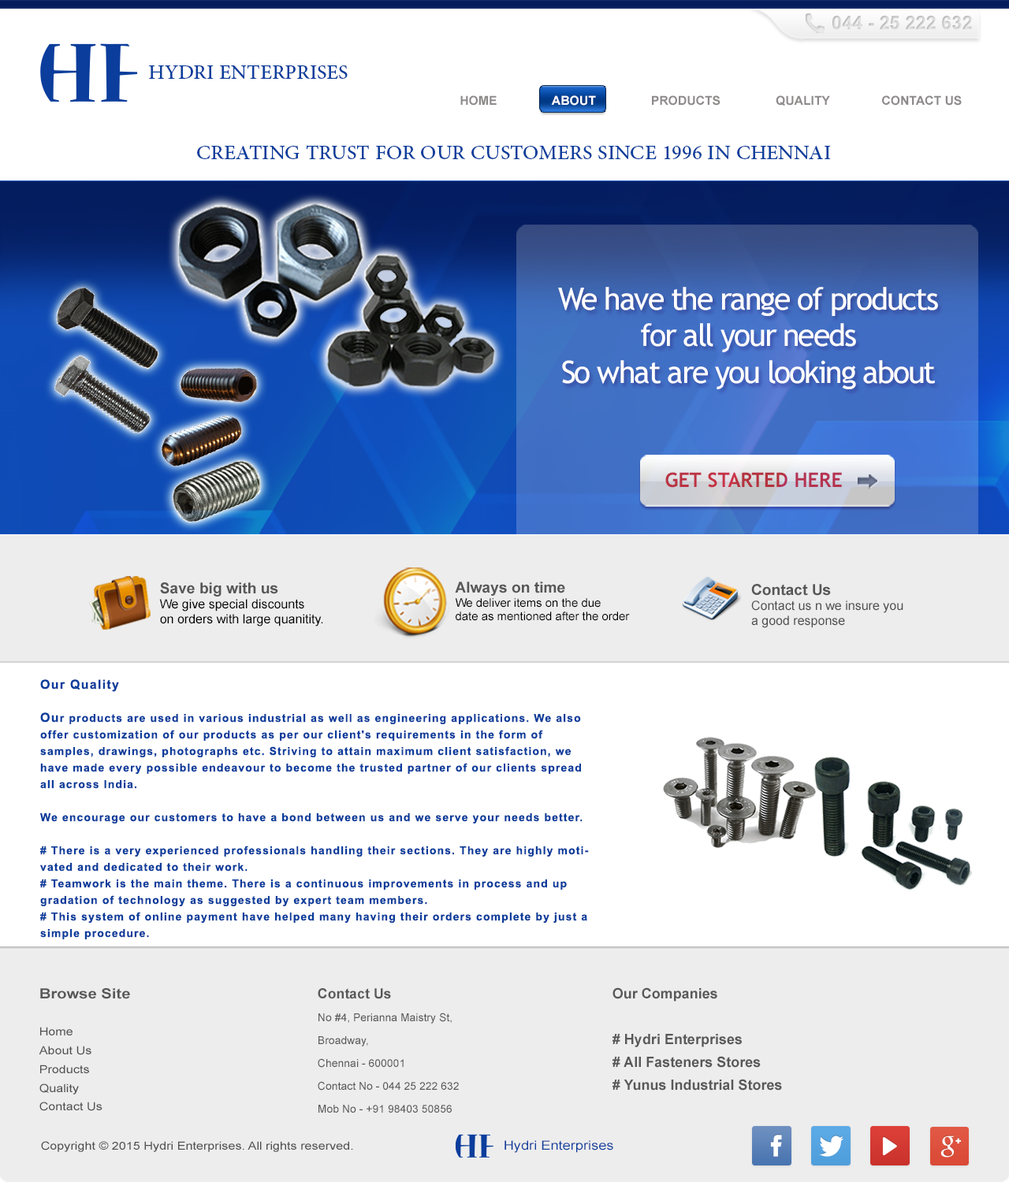
<style>
.page{position:relative;width:1009px;height:1182px;background:#ffffff}
.page>*{position:absolute;margin:0}
.t1{font:18.7px "Arial-BoldMT";color:#c0c0c0;text-transform:uppercase}
.t2{font:28.3px "AdobeArabic-Regular";color:#0c3e9c;text-transform:uppercase}
.t3{font:12.5px "Arial-BoldMT";color:#8d8a8a;text-transform:uppercase}
.t4{font:12.5px "Arial-BoldMT";color:#ffffff;text-transform:uppercase}
.t5{font:28.4px "AdobeArabic-Regular";color:#0c3e9c;text-transform:uppercase}
.t6{font:30.8px "TrebuchetMS";letter-spacing:-0.05em;color:#ffffff}
.t7{font:20px "TrebuchetMS-Bold";color:#b53343;text-transform:uppercase}
.t8{font:11.8px "ArialMT";color:#000000}
.t9{font:15.1px "Arial-BoldMT";color:#575757}
.t10{font:12.6px "ArialMT";color:#000000}
.t11{font:12.6px "ArialMT";color:#4f4f4f}
.t12{font:11px/16.5px "Arial-BoldMT";letter-spacing:0.08em;color:#0b3d9c}
.t13{font:12.6px/16.5px "Arial-BoldMT";letter-spacing:0.08em;color:#0b3d9c}
.t14{font:11.2px/18.7px "ArialMT";color:#4f4f4f;scale:1.14 1}
.t15{font:14px/18.7px "Arial-BoldMT";color:#585858;scale:1.14 1}
.t16{font:11px/22.9px "ArialMT";color:#585858}
.t17{font:14px/22.9px "Arial-BoldMT";color:#585858}
.t18{font:14.2px/22.9px "Arial-BoldMT";color:#585858}
.t19{font:11.2px "ArialMT";color:#4f4f4f;scale:1.14 1}
.t20{font:12.6px "ArialMT";color:#0c3e9c;scale:1.14 1}
</style>
<div class="page">
<p class="t1" style="left:832px;top:16px;width:140px;height:14px">044 - 25 222 632</p>
<p class="t2" style="left:148px;top:65px;width:200px;height:14px">Hydri enterprises</p>
<p class="t3" style="left:460px;top:95px;width:501px;height:11px">Home                <span class="t4">About  </span>              Products                Quality               Contact US</p>
<p class="t5" style="left:197px;top:145px;width:634px;height:14px">CREATING tRUST fOR OUR cUSTOMERS SINCE 1996 IN cHENNAI</p>
<p class="t6" style="left:558px;top:287px;width:380px;height:102px;text-align:center">We have the range of products<br>for all your needs<br>So what are you looking about</p>
<p class="t7" style="left:665px;top:472px;width:177px;height:16px">get started here</p>
<p class="t8" style="left:455px;top:582px;width:175px;height:39px"><span class="t9">Always on time<br></span>We deliver items on the due <br>date as mentioned after the order</p>
<p class="t10" style="left:159px;top:582px;width:164px;height:45px"><span class="t9">Save big with us<br></span>We give special discounts<br>on orders with large quanitity.</p>
<p class="t11" style="left:751px;top:584px;width:152px;height:44px"><span class="t9">Contact Us<br></span>Contact us n we insure you<br>a good response</p>
<p class="t12" style="left:40px;top:679px;width:549px;height:260px"><span class="t13">Our Quality<br><br>Ou</span>r products are used in various industrial as well as engineering applications. We also offer customization of our products as per our client's requirements in the form of samples, drawings, photographs etc. Striving to attain maximum client satisfaction, we have made every possible endeavour to become the trusted partner of our clients spread all across India.<br><br>We encourage our customers to have a bond between us and we serve your needs better.<br><br># There is a very experienced professionals handling their sections. They are highly motivated and dedicated to their work.<br># Teamwork is the main theme. There is a continuous improvements in process and up gradation of technology as suggested by expert team members.<br># This system of online payment have helped many having their orders complete by just a simple procedure.</p>
<p class="t14" style="left:39px;top:988px;width:91px;height:123px"><span class="t15">Browse Site<br><br></span>Home<br>About Us<br>Products<br>Quality<br>Contact Us</p>
<p class="t16" style="left:318px;top:988px;width:141px;height:125px"><span class="t17">Contact Us<br></span>No #4, Perianna Maistry St,<br>Broadway,<br>Chennai - 600001<br>Contact No - 044 25 222 632<br>Mob No - +91 98403 50856</p>
<p class="t18" style="left:612px;top:987px;width:170px;height:104px">Our Companies<br><br># Hydri Enterprises<br># All Fasteners Stores<br># Yunus Industrial Stores</p>
<p class="t19" style="left:41px;top:1141px;width:312px;height:11px">Copyright © 2015 Hydri Enterprises. All rights reserved.</p>
<p class="t20" style="left:504px;top:1140px;width:109px;height:13px">Hydri Enterprises</p>
</div>
